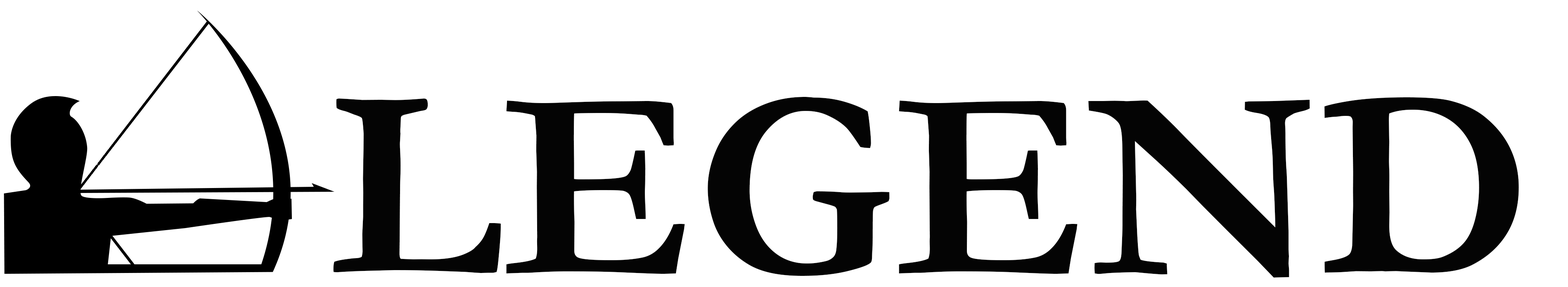
<style>
.page{position:relative;width:1568px;height:287px;background:#ffffff}
.page>*{position:absolute;margin:0}
.t1{font:273px "Garamond-Bold";color:#040404}
</style>
<div class="page">
<p class="t1" style="left:333px;top:97px;width:1186px;height:181px">LEGEND</p>
</div>
